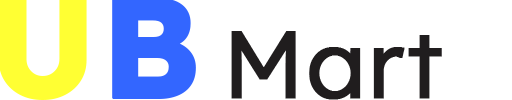
<style>
.page{position:relative;width:512px;height:100px;background:#ffffff}
.page>*{position:absolute;margin:0}
.t1{font:141.5px "Lexend-Bold";color:#ffff33;font-weight:bold}
.t2{font:141.5px "Lexend-Bold";color:#3366ff;font-weight:bold}
.t3{font:94.3px "Lexend-Regular";color:#201d1e;font-weight:bold}
.t4{font:94.3px "Lexend-Bold";color:#201d1e;font-weight:bold}
</style>
<div class="page">
<p class="t1" style="left:0px;top:0px;width:196px;height:100px">U<span class="t2">B</span></p>
<p class="t3" style="left:231px;top:31px;width:211px;height:69px"><span class="t4">     </span>Mart</p>
</div>
